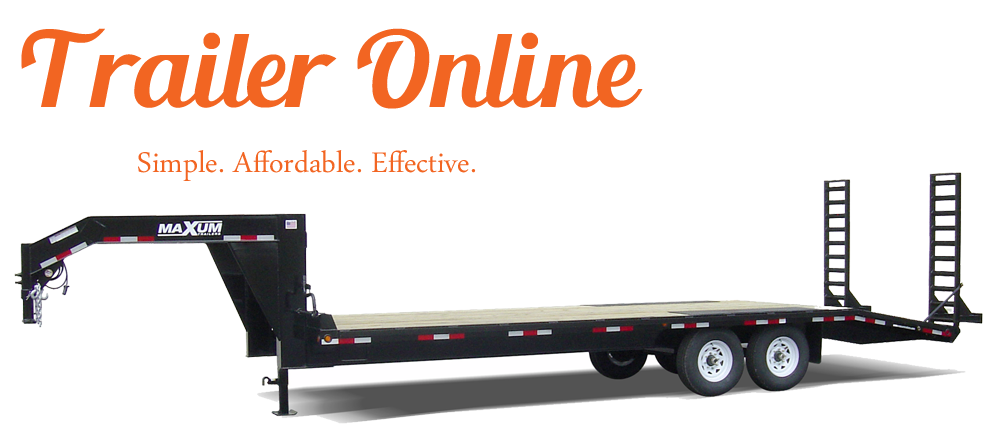
<style>
.page{position:relative;width:1000px;height:433px;background:#ffffff}
.page>*{position:absolute;margin:0}
.t1{font:104.1px "BlendaScript";color:#f26522}
.t2{font:41.6px "ArabicTypesetting";color:#f26522}
</style>
<div class="page">
<p class="t1" style="left:21px;top:28px;width:622px;height:81px">Trailer Online</p>
<p class="t2" style="left:138px;top:150px;width:338px;height:31px">Simple. Affordable. Effective.</p>
</div>
